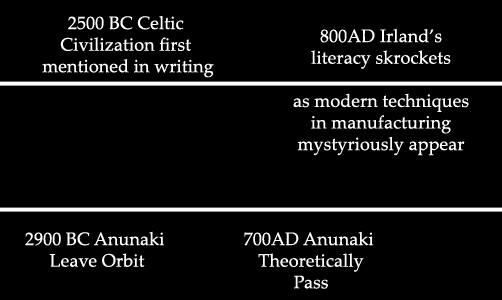
<style>
.page{position:relative;width:502px;height:300px;background:#000000}
.page>*{position:absolute;margin:0}
.t1{font:18px "PalatinoLinotype-Roman";letter-spacing:0.005em;color:#ffffff}
</style>
<div class="page">
<p class="t1" style="left:42px;top:15px;width:172px;height:63px;text-align:center">2500 BC Celtic <br>Civilization first <br>mentioned in writing</p>
<p class="t1" style="left:293px;top:28px;width:176px;height:128px;text-align:center">800AD Irland’s<br>literacy skrockets<br><br>as modern techniques<br>in manufacturing<br>mystyriously appear</p>
<p class="t1" style="left:25px;top:231px;width:139px;height:36px;text-align:center">2900 BC Anunaki <br>Leave Orbit</p>
<p class="t1" style="left:244px;top:231px;width:130px;height:58px;text-align:center">700AD Anunaki <br>Theoretically<br>Pass</p>
</div>
